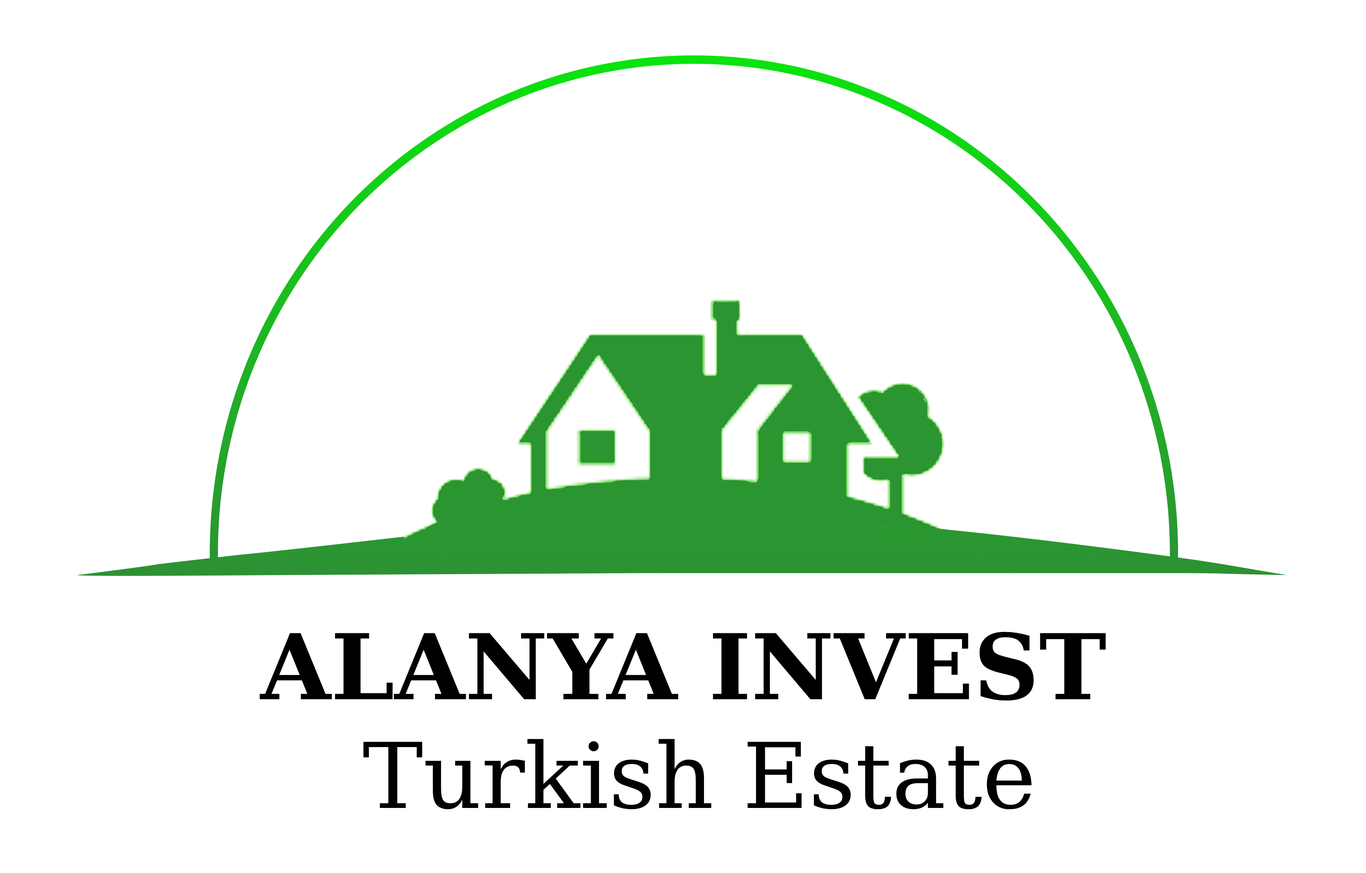
<style>
.page{position:relative;width:1366px;height:873px;background:#ffffff}
.page>*{position:absolute;margin:0}
.t1{font:90.7px "DejaVuSerif";color:#000000}
.t2{font:90.7px "DejaVuSerif-Bold";color:#000000}
</style>
<div class="page">
<p class="t1" style="left:260px;top:632px;width:846px;height:177px;text-align:center"><span class="t2">ALANYA INVEST </span><br>Turkish Estate</p>
</div>
